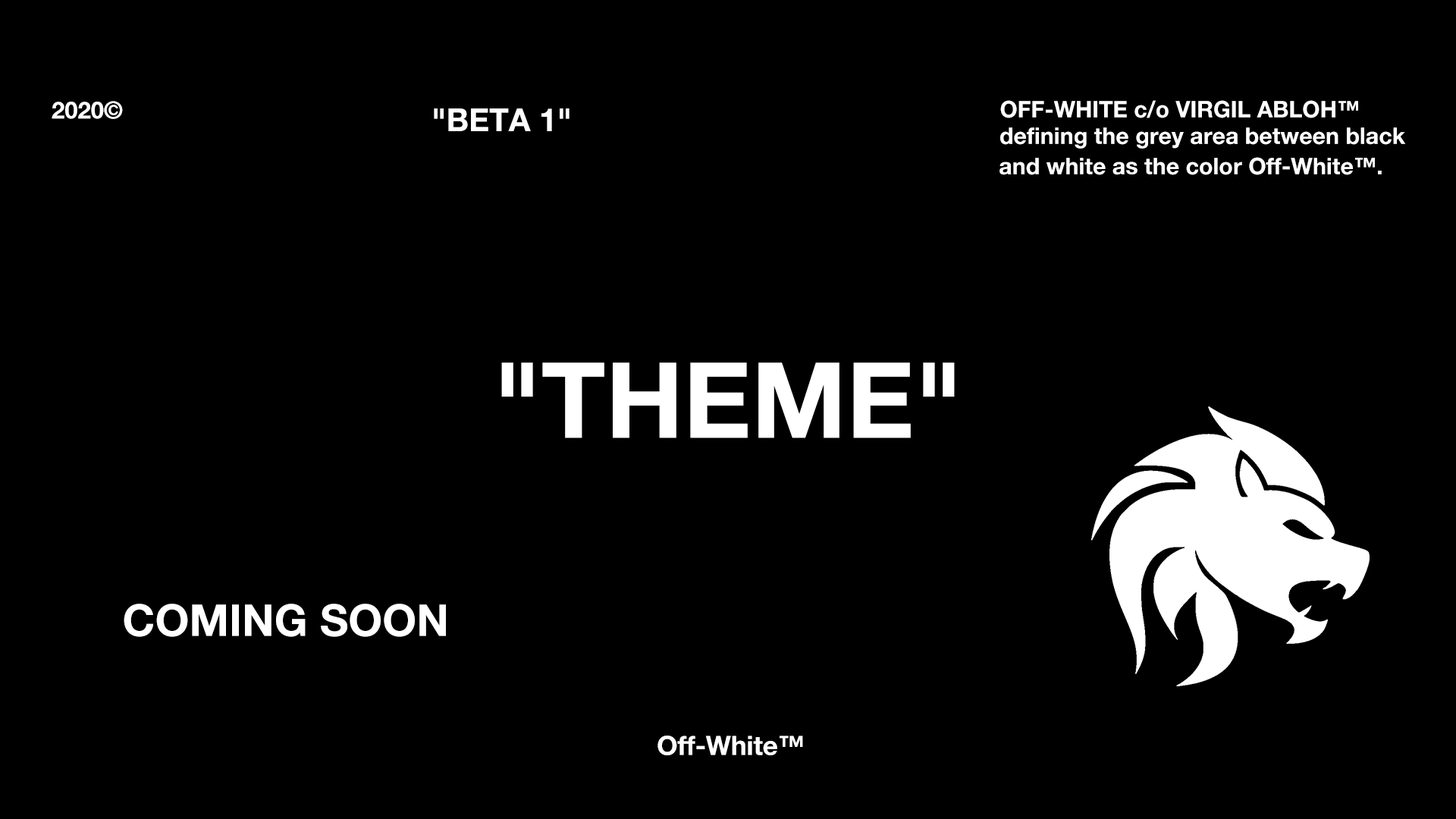
<style>
.page{position:relative;width:1456px;height:819px;background:#000000}
.page>*{position:absolute;margin:0}
.t1{font:23.6px "HelveticaNeue-Bold";color:#ffffff}
.t2{font:22.8px "HelveticaNeue-Bold";color:#ffffff}
.t3{font:31.8px "HelveticaNeue-Bold";color:#ffffff}
.t4{font:23px "HelveticaNeue-Bold";color:#ffffff}
.t5{font:104.9px "HelveticaNeue-Bold";color:#ffffff}
.t6{font:43.9px "HelveticaNeue-Bold";color:#ffffff}
.t7{font:26.4px "HelveticaNeue-Bold";color:#ffffff}
</style>
<div class="page">
<p class="t1" style="left:52px;top:101px;width:71px;height:18px">2020©</p>
<p class="t2" style="left:1000px;top:100px;width:358px;height:18px">OFF-WHITE c/o VIRGIL ABLOH™️</p>
<p class="t3" style="left:434px;top:108px;width:136px;height:23px">"BETA 1"</p>
<p class="t4" style="left:1000px;top:127px;width:406px;height:22px">defining the grey area between black</p>
<p class="t4" style="left:999px;top:157px;width:383px;height:18px">and white as the color Off-White™️.</p>
<p class="t5" style="left:501px;top:362px;width:454px;height:76px">"THEME"</p>
<p class="t6" style="left:124px;top:604px;width:322px;height:33px">COMING SOON</p>
<p class="t7" style="left:657px;top:736px;width:146px;height:19px">Off-White™️</p>
</div>
